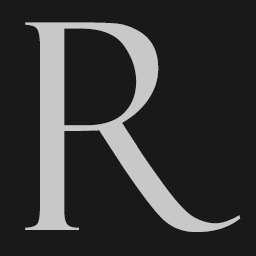
<style>
.page{position:relative;width:256px;height:256px;background:#191919}
.page>*{position:absolute;margin:0}
.t1{font:288.4px "FelixTitlingMT";color:#c8c8c8}
</style>
<div class="page">
<p class="t1" style="left:25px;top:22px;width:216px;height:210px">R</p>
</div>
